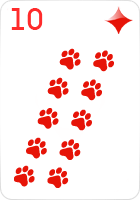
<style>
.page{position:relative;width:140px;height:200px;background:#ffffff}
.page>*{position:absolute;margin:0}
.t1{font:26px "CardCharacters";color:#ff2b2b}
</style>
<div class="page">
<p class="t1" style="left:11px;top:8px;width:32px;height:22px">10</p>
</div>
